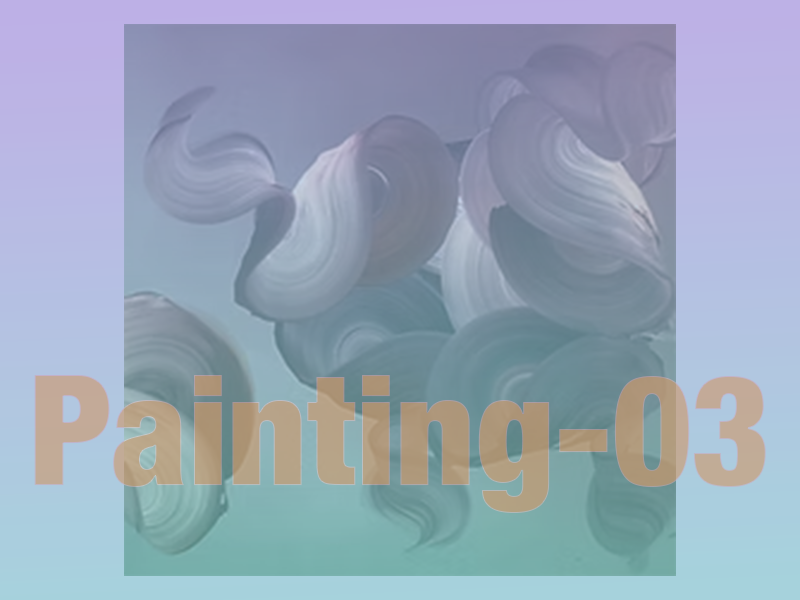
<style>
.page{position:relative;width:800px;height:600px}
.page>*{position:absolute;margin:0}
.t1{font:147.5px "HelveticaNeue-CondensedBlack";color:#b4a186}
</style>
<div class="page">
<p class="t1" style="left:34px;top:375px;width:732px;height:138px">Painting-03</p>
</div>
